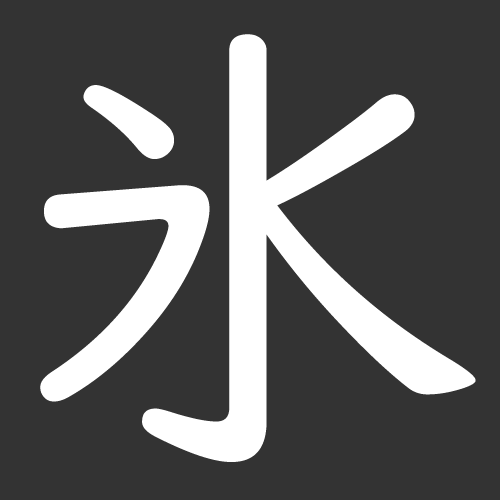
<style>
.page{position:relative;width:500px;height:500px;background:#333333}
.page>*{position:absolute;margin:0}
.t1{font:500px "UDDigiKyokashoNK-R";letter-spacing:-0.2em;color:#ffffff}
</style>
<div class="page">
<p class="t1" style="left:40px;top:34px;width:436px;height:428px">氷</p>
</div>
